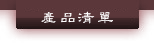
<style>
.page{position:relative;width:154px;height:43px;background:#5b373a}
.page>*{position:absolute;margin:0}
.t1{font:18px "DFKuoTaiBeiStd-W4";letter-spacing:0.025em;color:#ffffff}
</style>
<div class="page">
<p class="t1" style="left:41px;top:11px;width:72px;height:13px">產品清單</p>
</div>
